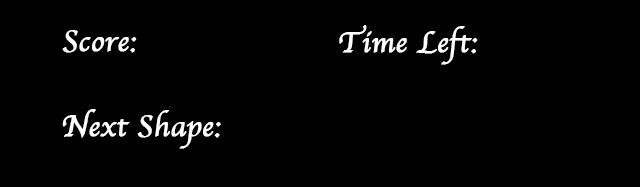
<style>
.page{position:relative;width:640px;height:187px;background:#000000}
.page>*{position:absolute;margin:0}
.t1{font:30px "Apple-Chancery";color:#ffffff;font-weight:bold}
</style>
<div class="page">
<p class="t1" style="left:62px;top:30px;width:75px;height:23px">Score:</p>
<p class="t1" style="left:339px;top:25px;width:139px;height:40px">Time Left:</p>
<p class="t1" style="left:62px;top:109px;width:159px;height:40px">Next Shape:</p>
</div>
